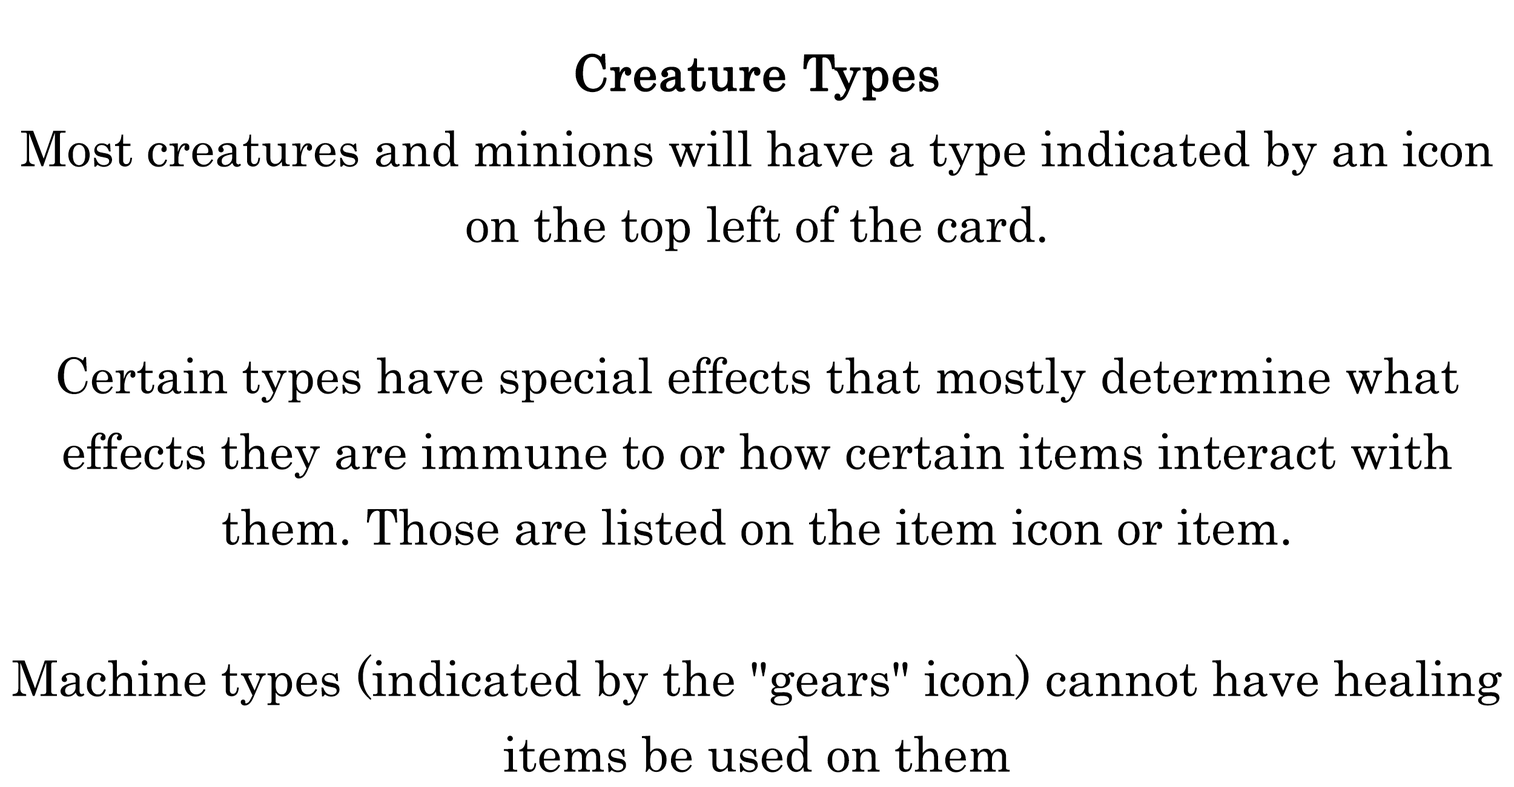
<style>
.page{position:relative;width:1514px;height:787px;background:#ffffff}
.page>*{position:absolute;margin:0}
.t1{font:84.1px/75.7px "Century";color:#000000}
.t2{font:84.1px/75.7px "Century";color:#000000;font-weight:bold}
</style>
<div class="page">
<p class="t1" style="left:12px;top:53px;width:1490px;height:720px;text-align:center"><span class="t2">Creature Types<br></span>Most creatures and minions will have a type indicated by an icon on the top left of the card.<br><br>Certain types have special effects that mostly determine what effects they are immune to or how certain items interact with them. Those are listed on the item icon or item.<br><br>Machine types (indicated by the "gears" icon) cannot have healing items be used on them</p>
</div>
